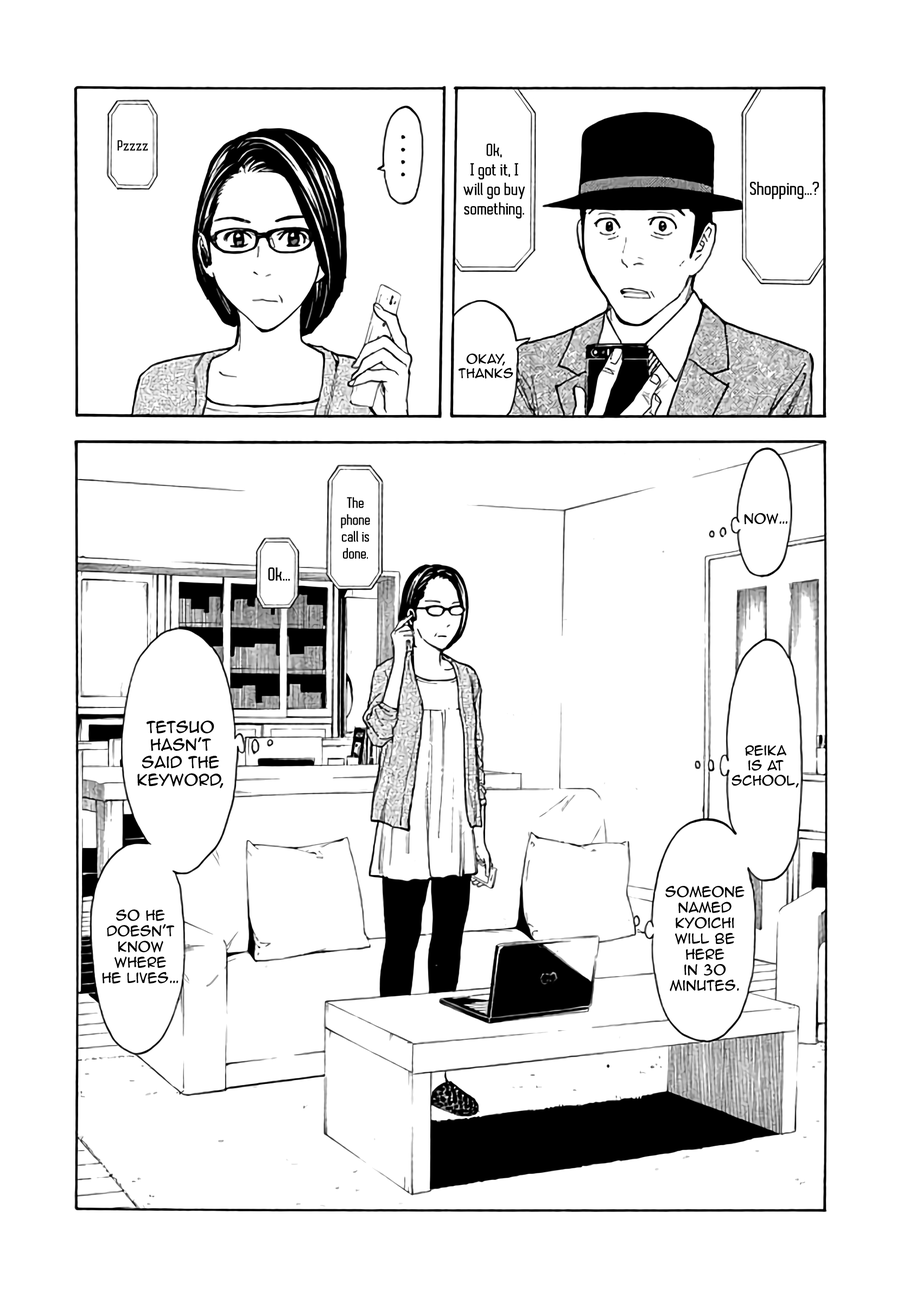
<style>
.page{position:relative;width:916px;height:1302px;background:#ffffff}
.page>*{position:absolute;margin:0}
.t1{font:13.6px "AutobusBold";color:#000000}
.t2{font:16.3px "AutobusBold";color:#000000}
.t3{font:17.4px "AutobusBold";color:#000000}
.t4{font:11.9px "AnimeAce2.0BB";color:#000000}
.t5{font:14.1px "AutobusBold";color:#000000}
.t6{font:12.5px "AnimeAce2.0BB";color:#000000}
.t7{font:14.6px "AnimeAce2.0BB";color:#000000}
.t8{font:13px "AnimeAce2.0BB";color:#000000}
</style>
<div class="page">
<p class="t1" style="left:117px;top:140px;width:31px;height:11px">Pzzzz</p>
<p class="t2" style="left:463px;top:143px;width:62px;height:76px;text-align:center">Ok, <br>I got it, I <br>will go buy something.</p>
<p class="t3" style="left:750px;top:182px;width:69px;height:17px">Shopping…?</p>
<p class="t4" style="left:458px;top:353px;width:55px;height:26px;text-align:center">Okay, thanks</p>
<p class="t5" style="left:341px;top:497px;width:29px;height:62px;text-align:center">The <br>phone <br>call is <br>done.</p>
<p class="t6" style="left:744px;top:513px;width:43px;height:12px">Now…</p>
<p class="t3" style="left:268px;top:567px;width:22px;height:14px">Ok…</p>
<p class="t7" style="left:137px;top:720px;width:87px;height:68px;text-align:center">Tetsuo <br>hasn't <br>said the<br>keyword,</p>
<p class="t6" style="left:731px;top:745px;width:68px;height:43px;text-align:center">Reika<br>is at <br>school,</p>
<p class="t8" style="left:665px;top:885px;width:79px;height:106px;text-align:center">Someone named <br>Kyoichi <br>will be here <br>in 30 <br>minutes.</p>
<p class="t8" style="left:102px;top:909px;width:76px;height:75px;text-align:center">So he <br>doesn't <br>know <br>where <br>he lives…</p>
</div>
